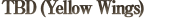
<style>
.page{position:relative;width:175px;height:18px;background:#ffffff}
.page>*{position:absolute;margin:0}
.t1{font:18px "RyuminPro-ExBold";letter-spacing:-0.08em;color:#4a3f32;font-weight:bold;scale:0.9 1}
</style>
<div class="page">
<p class="t1" style="left:1px;top:0px;width:143px;height:18px">TBD (Yellow Wings)</p>
</div>
